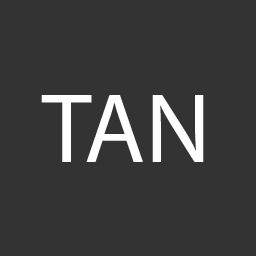
<style>
.page{position:relative;width:256px;height:256px;background:#333333}
.page>*{position:absolute;margin:0}
.t1{font:100px "MyriadPro-Regular";color:#ffffff}
</style>
<div class="page">
<p class="t1" style="left:41px;top:95px;width:163px;height:67px">TAN</p>
</div>
